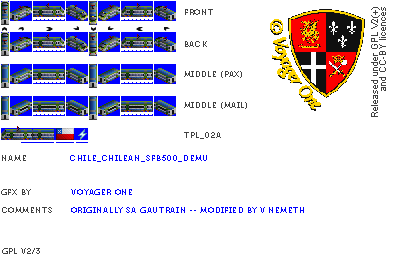
<style>
.page{position:relative;width:400px;height:270px;background:#ffffff}
.page>*{position:absolute;margin:0}
.t1{font:8px "Museo700-Regular";letter-spacing:0.075em;color:#404040;text-transform:uppercase}
.t2{font:8px "Museo700-Regular";letter-spacing:0.075em;color:#0000ff;text-transform:uppercase}
</style>
<div class="page">
<p class="t1" style="left:185px;top:9px;width:28px;height:6px">front</p>
<p class="t1" style="left:185px;top:41px;width:22px;height:6px">back</p>
<p class="t1" style="left:184px;top:71px;width:58px;height:7px">middle (pax)</p>
<p class="t1" style="left:184px;top:102px;width:63px;height:7px">middle (mail)</p>
<p class="t1" style="left:184px;top:132px;width:37px;height:7px">tpl_02a</p>
<p class="t1" style="left:2px;top:155px;width:24px;height:6px">name</p>
<p class="t2" style="left:70px;top:155px;width:137px;height:7px">Chile_Chilean_SFB500_DEMU</p>
<p class="t1" style="left:1px;top:189px;width:30px;height:6px">gfx by</p>
<p class="t2" style="left:71px;top:189px;width:61px;height:6px">voyager one</p>
<p class="t1" style="left:2px;top:207px;width:50px;height:6px">comments</p>
<p class="t2" style="left:71px;top:207px;width:233px;height:6px">originally sa gautrain -- modified by v nemeth</p>
<p class="t1" style="left:2px;top:248px;width:38px;height:6px">gpl v2/3</p>
</div>
